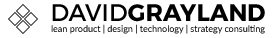
<style>
.page{position:relative;width:275px;height:38px;background:#ffffff}
.page>*{position:absolute;margin:0}
.t1{font:9px "Lato-Regular";color:#000000}
.t2{font:24px "Montserrat-Regular";color:#000000}
.t3{font:24px "Montserrat-Bold";color:#000000}
</style>
<div class="page">
<p class="t1" style="left:51px;top:4px;width:214px;height:30px;text-align:center"><span class="t2">DAVID</span><span class="t3">GRAYLAND<br></span>lean product | design | technology | strategy consulting</p>
</div>
